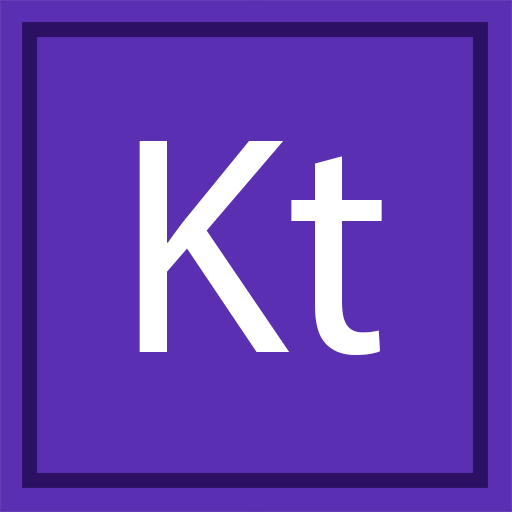
<style>
.page{position:relative;width:512px;height:512px;background:#5a2fb1}
.page>*{position:absolute;margin:0}
.t1{font:313.7px "MyriadPro-Regular";color:#ffffff}
</style>
<div class="page">
<p class="t1" style="left:139px;top:141px;width:243px;height:214px">Kt</p>
</div>
